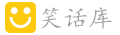
<style>
.page{position:relative;width:120px;height:35px;background:#ffffff}
.page>*{position:absolute;margin:0}
.t1{font:25px "¿¬Ìå";color:#a0a0a0}
</style>
<div class="page">
<p class="t1" style="left:41px;top:7px;width:71px;height:23px">笑话库</p>
</div>
